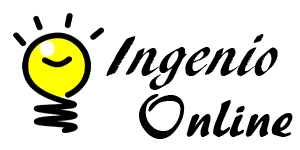
<style>
.page{position:relative;width:300px;height:150px;background:#ffffff}
.page>*{position:absolute;margin:0}
.t1{font:60px "ARBLANCA";color:#000000}
.t2{font:60px "ARBERKLEY";color:#000000}
</style>
<div class="page">
<p class="t1" style="left:106px;top:34px;width:172px;height:56px">Ingenio</p>
<p class="t2" style="left:139px;top:94px;width:154px;height:45px">Online</p>
</div>
